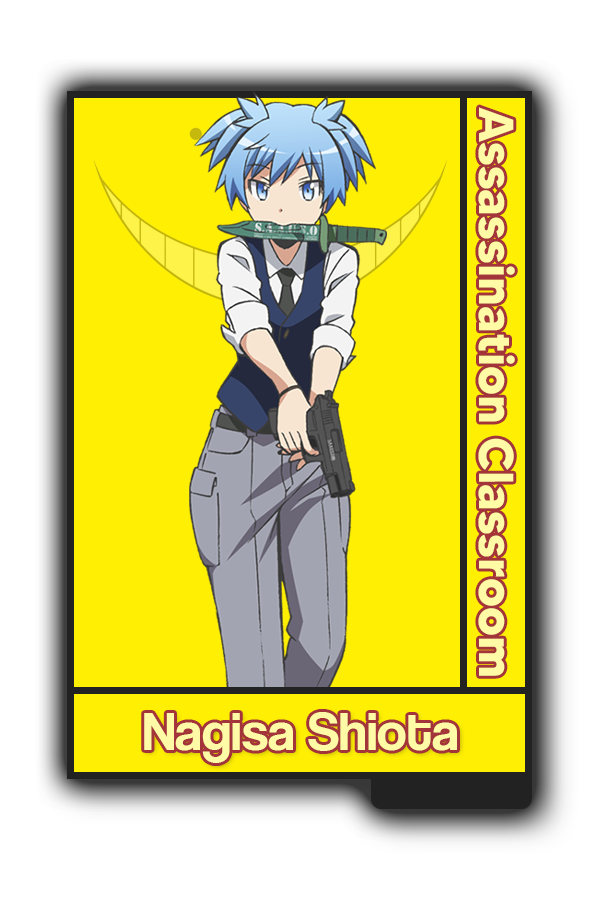
<style>
.page{position:relative;width:600px;height:900px;background:#ffef03}
.page>*{position:absolute;margin:0}
.t1{font:48.8px "MADETOMMY-Bold";color:#fefaa5}
.t2{font:55px "CoolveticaRg-Regular";color:#fefaa5}
</style>
<div class="page">
<p class="t1" style="left:478px;top:107px;width:37px;height:569px;rotate:90deg">Assassination Classroom</p>
<p class="t2" style="left:144px;top:712px;width:313px;height:51px">Nagisa Shiota</p>
</div>
